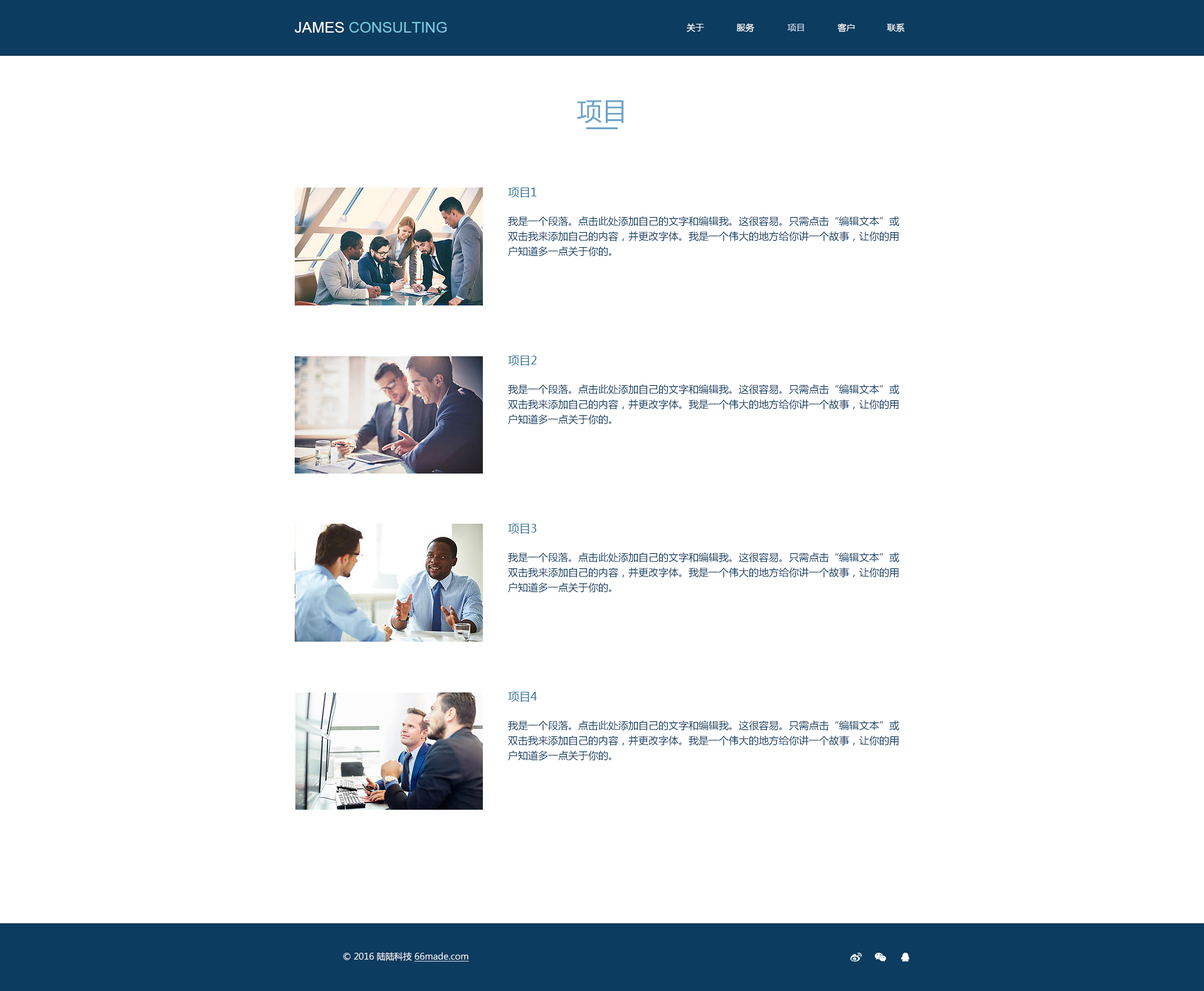
<style>
.page{position:relative;width:1204px;height:991px;background:#ffffff}
.page>*{position:absolute;margin:0}
.t1{font:15px "ArialMT";color:#79cada}
.t2{font:15px "ArialMT";color:#ffffff}
.t3{font:8.8px "MicrosoftYaHei";color:#ffffff}
.t4{font:8.8px "MicrosoftYaHei";color:#d1e0eb}
.t5{font:25.1px "MicrosoftYaHei";color:#6ea4ca}
.t6{font:11.3px "MicrosoftYaHei";color:#39729b}
.t7{font:10px/15px "MicrosoftYaHei";color:#0c3c60}
.t8{font:8.8px "MicrosoftYaHei";color:#ffffff;text-decoration:underline}
</style>
<div class="page">
<p class="t1" style="left:295px;top:22px;width:152px;height:11px"><span class="t2">JAMES </span>CONSULTING</p>
<p class="t3" style="left:687px;top:23px;width:17px;height:9px">关于</p>
<p class="t3" style="left:737px;top:23px;width:17px;height:9px">服务</p>
<p class="t4" style="left:787px;top:24px;width:17px;height:7px">项目</p>
<p class="t3" style="left:838px;top:23px;width:17px;height:9px">客户</p>
<p class="t3" style="left:887px;top:23px;width:18px;height:9px">联系</p>
<p class="t5" style="left:577px;top:100px;width:47px;height:24px">项目</p>
<p class="t6" style="left:508px;top:187px;width:29px;height:10px">项目1</p>
<p class="t7" style="left:508px;top:216px;width:391px;height:40px">我是一个段落。点击此处添加自己的文字和编辑我。这很容易。只需点击“编辑文本”或双击我来添加自己的内容，并更改字体。我是一个伟大的地方给你讲一个故事，让你的用户知道多一点关于你的。</p>
<p class="t6" style="left:508px;top:355px;width:29px;height:11px">项目2</p>
<p class="t7" style="left:508px;top:384px;width:391px;height:40px">我是一个段落。点击此处添加自己的文字和编辑我。这很容易。只需点击“编辑文本”或双击我来添加自己的内容，并更改字体。我是一个伟大的地方给你讲一个故事，让你的用户知道多一点关于你的。</p>
<p class="t6" style="left:508px;top:524px;width:29px;height:10px">项目3</p>
<p class="t7" style="left:508px;top:552px;width:391px;height:40px">我是一个段落。点击此处添加自己的文字和编辑我。这很容易。只需点击“编辑文本”或双击我来添加自己的内容，并更改字体。我是一个伟大的地方给你讲一个故事，让你的用户知道多一点关于你的。</p>
<p class="t6" style="left:508px;top:692px;width:29px;height:10px">项目4</p>
<p class="t7" style="left:508px;top:720px;width:391px;height:40px">我是一个段落。点击此处添加自己的文字和编辑我。这很容易。只需点击“编辑文本”或双击我来添加自己的内容，并更改字体。我是一个伟大的地方给你讲一个故事，让你的用户知道多一点关于你的。</p>
<p class="t3" style="left:343px;top:952px;width:126px;height:9px">© 2016 陆陆科技 <span class="t8">66made.com</span></p>
</div>
